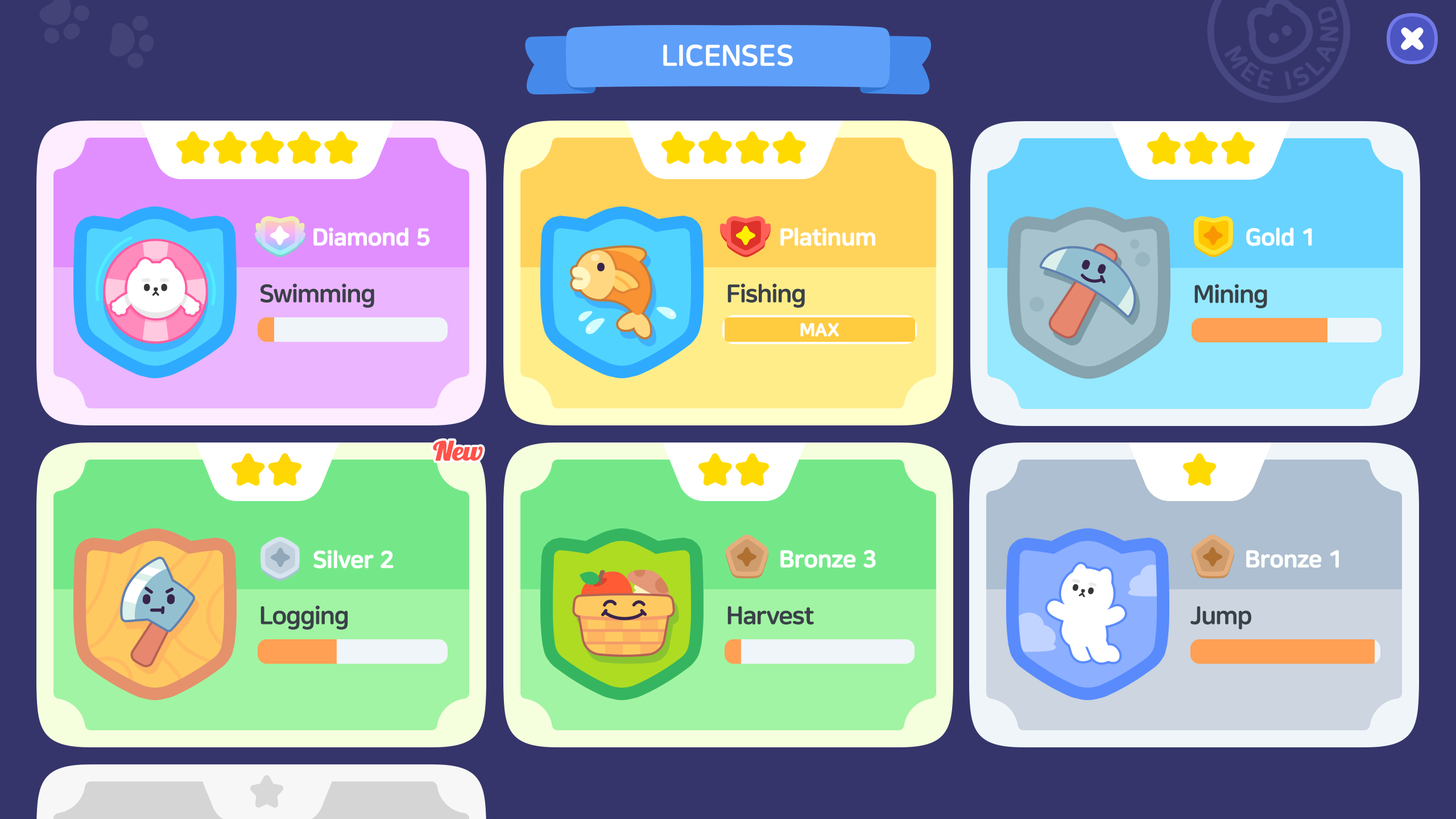
<style>
.page{position:relative;width:1456px;height:819px;background:#35356b}
.page>*{position:absolute;margin:0}
.t1{font:29.6px "NanumSquareRoundEB";color:#ffffff;text-transform:uppercase}
.t2{font:23.5px "NanumSquareRoundEB";letter-spacing:-0.025em;color:#ffffff;font-weight:bold}
.t3{font:25px "NanumSquareRoundEB";letter-spacing:-0.025em;color:#3a4148}
.t4{font:18.2px "NanumSquareRoundEB";letter-spacing:-0.025em;color:#ffffff;text-transform:uppercase;font-weight:bold}
.t5{font:25.6px "Lobster1.3";letter-spacing:-0.025em;color:#ff524a;font-weight:bold;scale:1.11 1}
</style>
<div class="page">
<p class="t1" style="left:663px;top:44px;width:130px;height:23px">Licenses</p>
<p class="t2" style="left:313px;top:227px;width:117px;height:19px">Diamond 5</p>
<p class="t2" style="left:780px;top:227px;width:95px;height:19px">Platinum</p>
<p class="t2" style="left:1246px;top:227px;width:66px;height:19px">Gold 1</p>
<p class="t3" style="left:260px;top:283px;width:114px;height:25px">Swimming</p>
<p class="t3" style="left:727px;top:283px;width:78px;height:25px">Fishing</p>
<p class="t3" style="left:1194px;top:284px;width:73px;height:24px">Mining</p>
<p class="t4" style="left:800px;top:323px;width:39px;height:14px">Max</p>
<p class="t5" style="left:433px;top:440px;width:50px;height:21px">New</p>
<p class="t2" style="left:313px;top:550px;width:81px;height:19px">Silver 2</p>
<p class="t2" style="left:780px;top:550px;width:96px;height:18px">Bronze 3</p>
<p class="t2" style="left:1246px;top:550px;width:93px;height:18px">Bronze 1</p>
<p class="t3" style="left:260px;top:605px;width:88px;height:25px">Logging</p>
<p class="t3" style="left:727px;top:606px;width:87px;height:18px">Harvest</p>
<p class="t3" style="left:1190px;top:606px;width:61px;height:24px">Jump</p>
</div>
